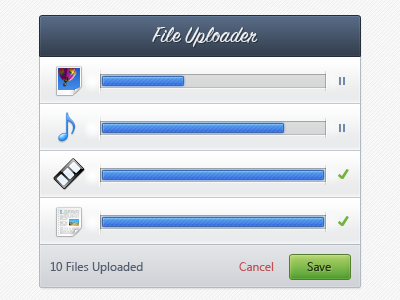
<style>
.page{position:relative;width:400px;height:300px}
.page>*{position:absolute;margin:0}
.t1{font:24px "SignPainterHouseScript";color:#ffffff}
.t2{font:12px "SegoeUI";color:#545e6e}
.t3{font:12px "SegoeUI";color:#bf5252}
.t4{font:12px "SegoeUI";color:#202e13}
</style>
<div class="page">
<p class="t1" style="left:152px;top:27px;width:106px;height:20px">File Uploader</p>
<p class="t2" style="left:50px;top:262px;width:93px;height:12px">10 Files Uploaded</p>
<p class="t3" style="left:239px;top:262px;width:35px;height:9px">Cancel</p>
<p class="t4" style="left:307px;top:262px;width:24px;height:9px">Save</p>
</div>
